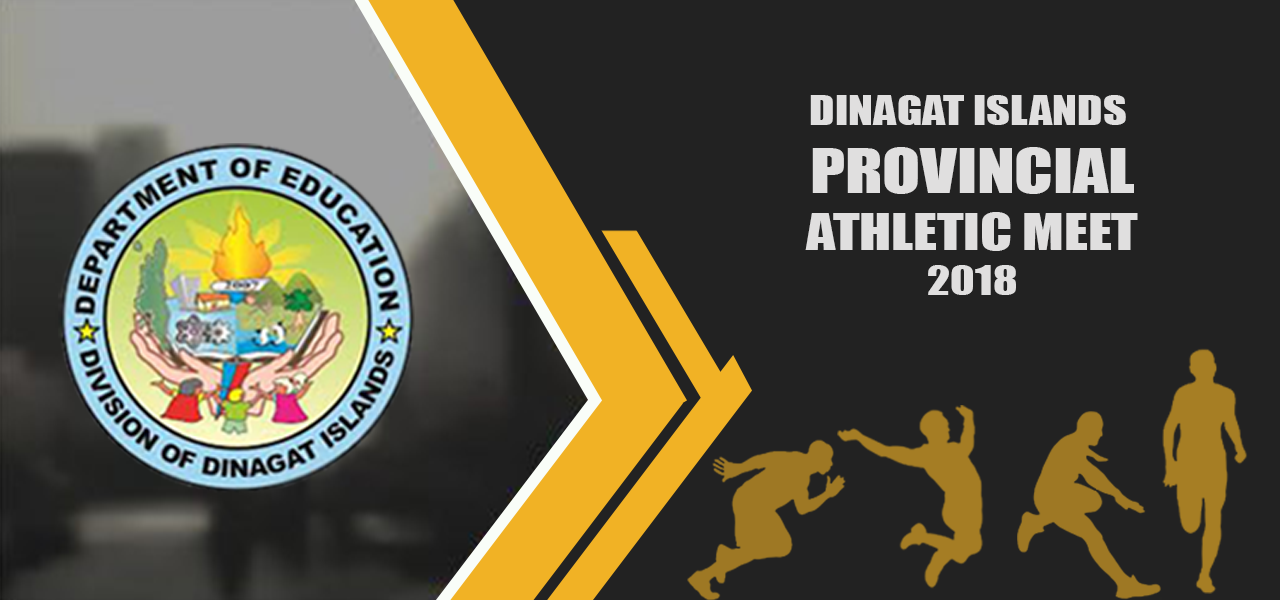
<style>
.page{position:relative;width:1280px;height:600px;background:#222222}
.page>*{position:absolute;margin:0}
.t1{font:9.1px "Impact";color:#e0dfdf;text-transform:uppercase;scale:1.22 1}
.t2{font:56.8px "Impact";color:#e0dfdf;text-transform:uppercase;scale:1.22 1}
.t3{font:47.4px "Impact";color:#e0dfdf;text-transform:uppercase;scale:1.22 1}
</style>
<div class="page">
<p class="t1" style="left:805px;top:95px;width:333px;height:200px;text-align:center">dinagat islands <br><span class="t2">provincial<br></span><span class="t3">athletic meet<br></span>2018</p>
</div>
